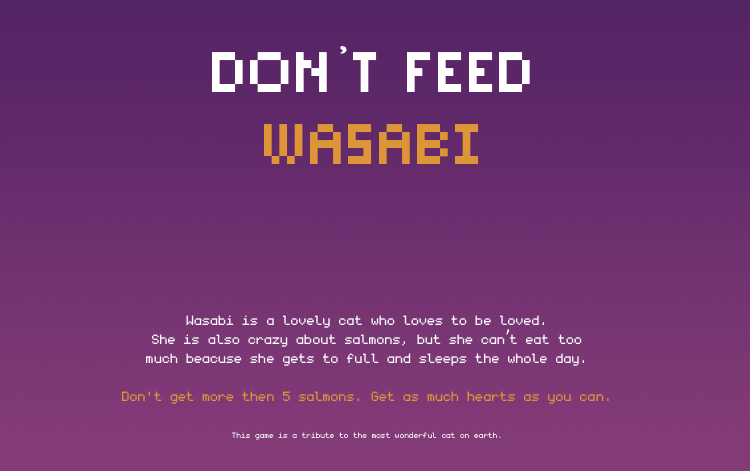
<style>
.page{position:relative;width:750px;height:471px}
.page>*{position:absolute;margin:0}
.t1{font:61.4px/71.9px "PixelSix02";color:#de9537;text-transform:uppercase}
.t2{font:61.4px/71.9px "PixelSix02";color:#ffffff;text-transform:uppercase}
.t3{font:61.4px/71.9px "Icekingdom-Bold";color:#ffffff;text-transform:uppercase}
.t4{font:61.4px/65.2px "PixelSix02";color:#ffffff;text-transform:uppercase}
.t5{font:21.4px/18.9px "monogramextended";color:#ffffff}
.t6{font:21.4px/18.9px "MyriadPro-Regular";color:#ffffff}
.t7{font:21.4px/18.9px "monogramextended";color:#de9537}
.t8{font:12.4px/18.9px "monogramextended";color:#ffffff}
</style>
<div class="page">
<p class="t1" style="left:212px;top:45px;width:318px;height:119px;text-align:center"><span class="t2">don</span><span class="t3">’</span><span class="t2">t </span><span class="t4">feed<br></span>wasabi</p>
<p class="t5" style="left:122px;top:315px;width:487px;height:125px;text-align:center">Wasabi is a lovely cat who loves to be loved.<br>She is also crazy about salmons, but she can<span class="t6">’</span>t eat too <br>much beacuse she gets to full and sleeps the whole day. <br><br><span class="t7">Don't get more then 5 salmons. Get as much hearts as you can.<br><br></span><span class="t8">This game is a tribute to the most wonderful cat on earth.</span></p>
</div>
